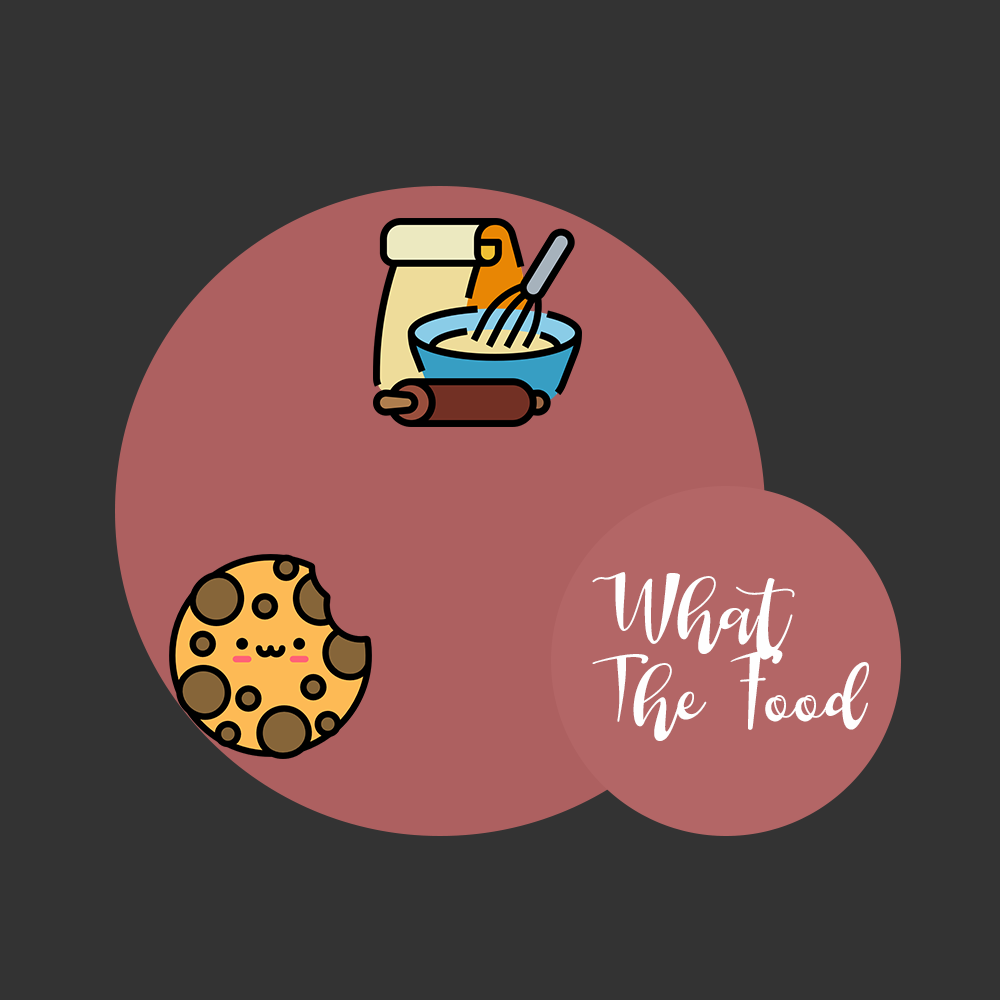
<style>
.page{position:relative;width:1000px;height:1000px;background:#333333}
.page>*{position:absolute;margin:0}
.t1{font:72px "AuntenBedanyRegular";color:#fefefe}
</style>
<div class="page">
<p class="t1" style="left:592px;top:572px;width:277px;height:169px">What<br>The Food</p>
</div>
